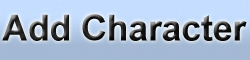
<style>
.page{position:relative;width:250px;height:60px}
.page>*{position:absolute;margin:0}
.t1{font:36px "Arial-BoldMT";letter-spacing:-0.01em}
</style>
<div class="page">
<p class="t1" style="left:2px;top:14px;width:245px;height:27px">Add Character</p>
</div>
